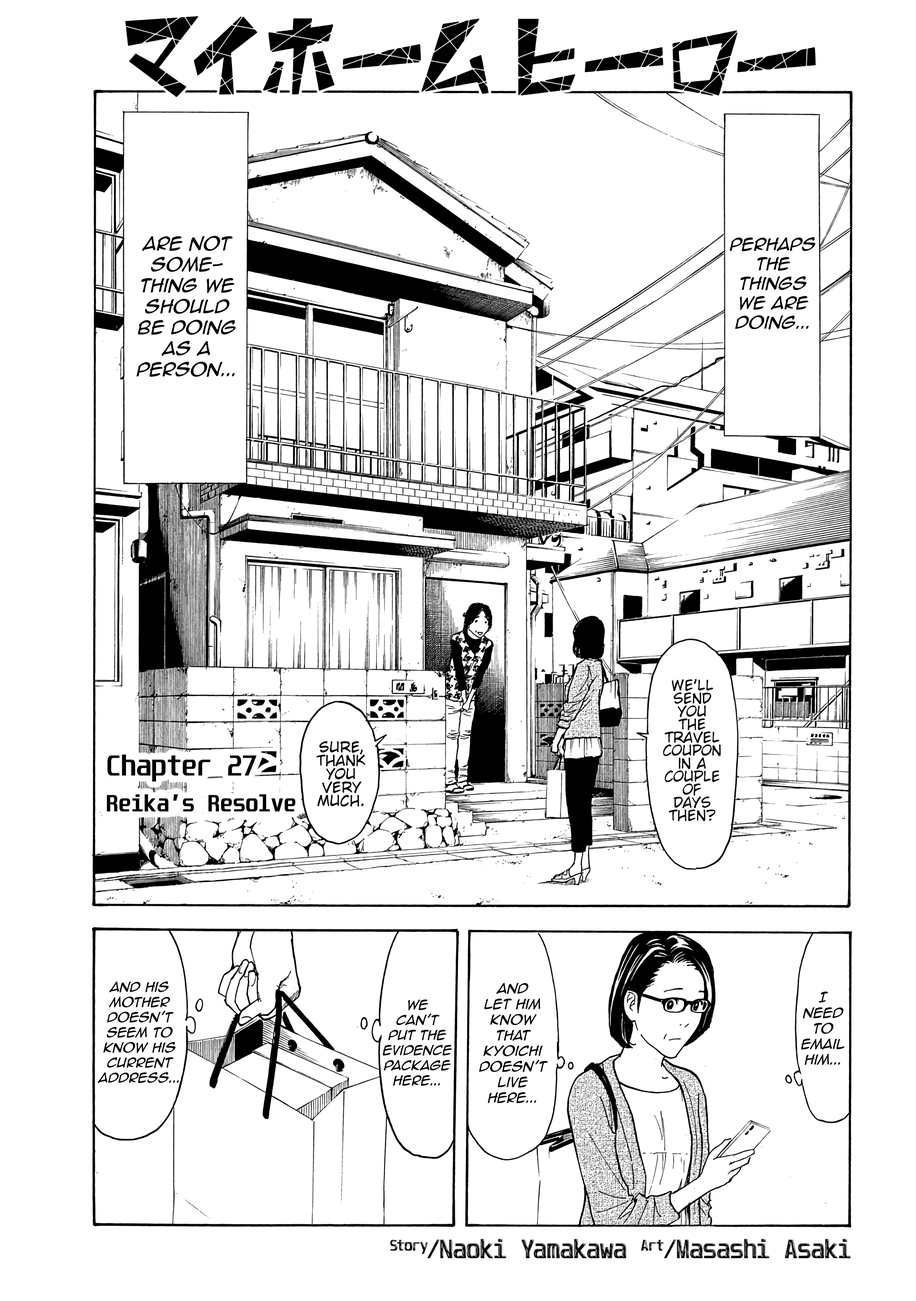
<style>
.page{position:relative;width:916px;height:1301px;background:#ffffff}
.page>*{position:absolute;margin:0}
.t1{font:17.5px "AnimeAce2.0BB-Italic";color:#000000}
.t2{font:16.3px "AnimeAce2.0BB-Italic";color:#000000}
.t3{font:24.8px "Unispace-Bold";color:#000000}
.t4{font:19.9px "Unispace-Bold";color:#000000;font-weight:bold}
.t5{font:12.6px "AnimeAce2.0BB-Italic";color:#000000}
.t6{font:13px "AnimeAce2.0BB-Italic";color:#000000}
</style>
<div class="page">
<p class="t1" style="left:137px;top:236px;width:99px;height:141px;text-align:center">are not something we should be doing as a person...</p>
<p class="t2" style="left:730px;top:237px;width:86px;height:93px;text-align:center">perhaps The things we are doing...</p>
<p class="t3" style="left:107px;top:755px;width:150px;height:27px">Chapter 27</p>
<p class="t4" style="left:107px;top:794px;width:189px;height:18px">Reika’s Resolve</p>
<p class="t5" style="left:98px;top:982px;width:81px;height:101px;text-align:center">and his mother doesn’t seem to know his current address...</p>
<p class="t6" style="left:479px;top:983px;width:69px;height:121px;text-align:center">and <br>let him know that kyoichi doesn’t live here...</p>
<p class="t5" style="left:383px;top:999px;width:70px;height:87px;text-align:center">We <br>can’t <br>put the evidence package here...</p>
<p class="t6" style="left:801px;top:992px;width:44px;height:73px;text-align:center">I<br>need<br>to<br>email<br>him...</p>
</div>
